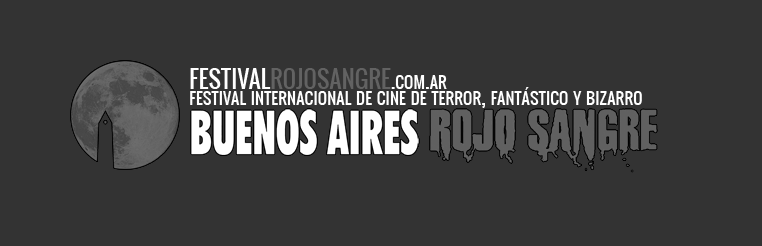
<style>
.page{position:relative;width:762px;height:246px;background:#333333}
.page>*{position:absolute;margin:0}
.t1{font:23.3px "Oswald-Regular";color:#626262;font-variant:small-caps}
.t2{font:23.3px "Oswald-Regular";color:#ffffff;font-variant:small-caps}
</style>
<div class="page">
<p class="t1" style="left:190px;top:68px;width:257px;height:21px"><span class="t2">FESTIVAL</span>ROJOSANGRE<span class="t2">.com.ar</span></p>
<p class="t2" style="left:190px;top:87px;width:452px;height:21px">festival internacional de cine de terror, fantástico y bizarro</p>
</div>
